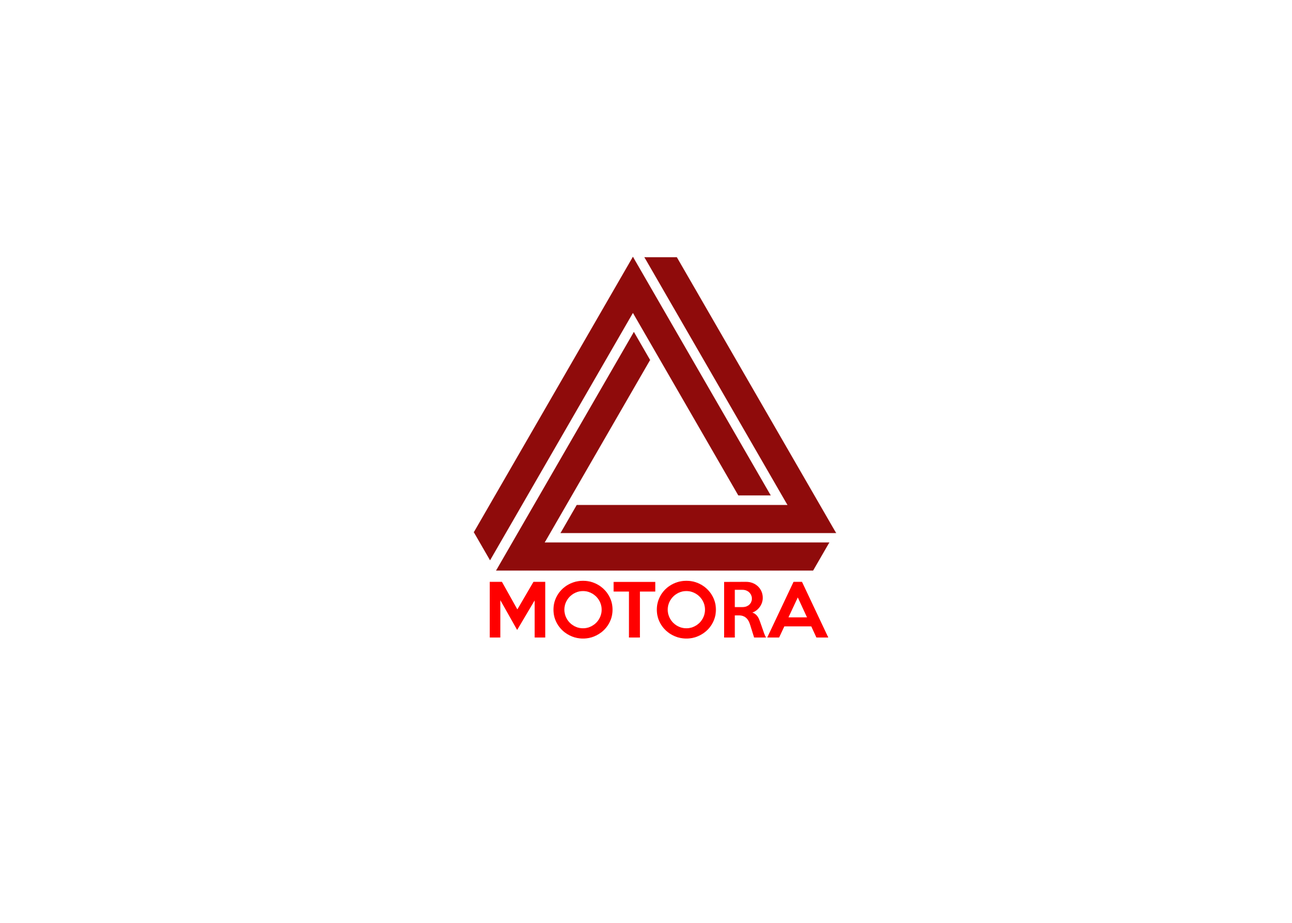
<style>
.page{position:relative;width:1292px;height:923px;background:#ffffff}
.page>*{position:absolute;margin:0}
.t1{font:69.2px "KeepCalm-Medium";color:#ff0000}
</style>
<div class="page">
<p class="t1" style="left:490px;top:580px;width:339px;height:59px">MOTORA</p>
</div>
